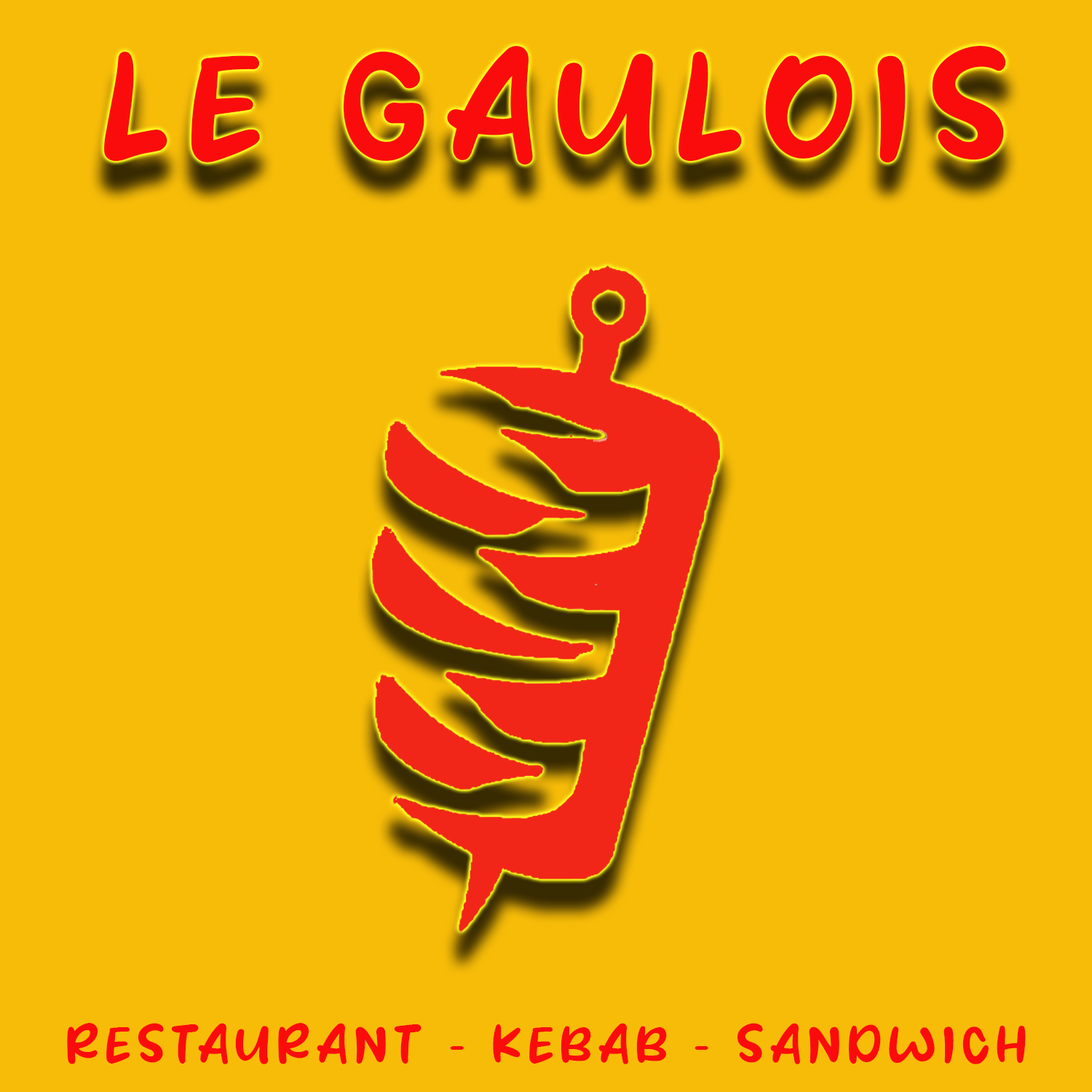
<style>
.page{position:relative;width:1092px;height:1092px;background:#f7bc08}
.page>*{position:absolute;margin:0}
.t1{font:123.1px "Waffle-Story";letter-spacing:0.14em;color:#fa0c0c;text-transform:uppercase}
.t2{font:42.5px "Waffle-Story";letter-spacing:0.14em;color:#fa0c0c;text-transform:uppercase}
</style>
<div class="page">
<p class="t1" style="left:104px;top:46px;width:902px;height:119px">Le Gaulois</p>
<p class="t2" style="left:67px;top:1023px;width:959px;height:41px">restaurant - kebab - sandwich</p>
</div>
